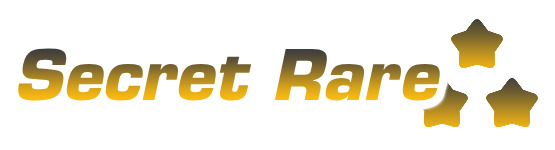
<style>
.page{position:relative;width:555px;height:150px;background:#ffffff}
.page>*{position:absolute;margin:0}
.t1{font:68px "Eurostile-BoldOblique"}
</style>
<div class="page">
<p class="t1" style="left:18px;top:48px;width:422px;height:53px">Secret Rare</p>
</div>
